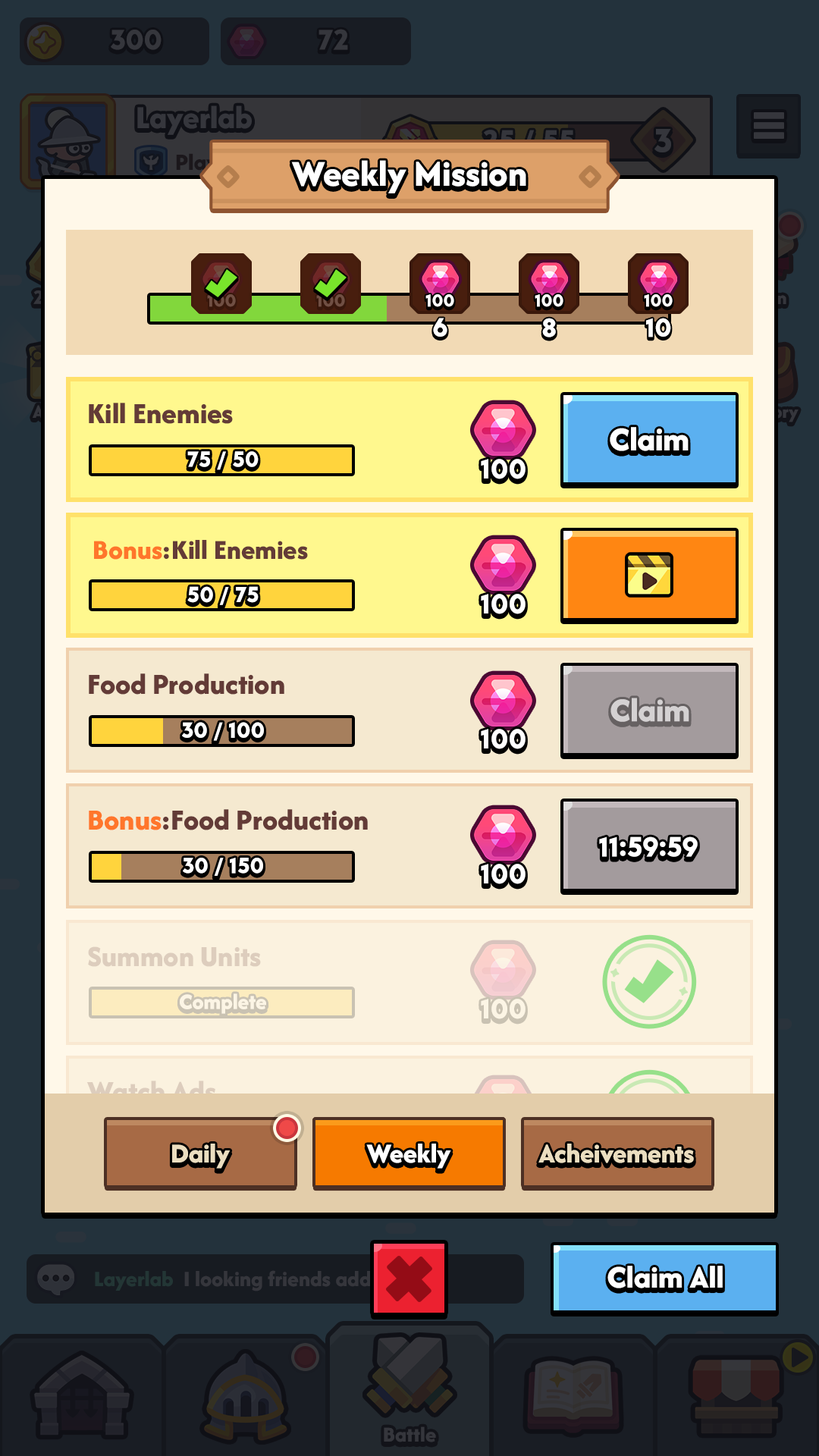
<style>
.page{position:relative;width:819px;height:1456px}
.page>*{position:absolute;margin:0}
.t1{font:37.9px "AfacadFlux-ExtraBold";color:#ffffff}
.t2{font:18.2px "LTAvocado-Bold";color:#704f43}
.t3{font:18.2px "LTAvocado-Bold";color:#ffffff}
.t4{font:27.3px "LTAvocado-Bold";color:#ffffff}
.t5{font:30.3px "AfacadFlux-ExtraBold";color:#633b37}
.t6{font:34.9px "AfacadFlux-ExtraBold";color:#ffffff}
.t7{font:22.7px "LTAvocado-Bold";color:#ffffff}
.t8{font:28.8px "LTAvocado-Bold";color:#ffffff}
.t9{font:28.4px "AfacadFlux-ExtraBold";color:#633b37}
.t10{font:28.4px "AfacadFlux-ExtraBold";color:#ff762b}
.t11{font:34.9px "AfacadFlux-ExtraBold";color:#d4d1d2}
.t12{font:30.3px "AfacadFlux-ExtraBold";color:#ff762b}
.t13{font:30.3px "AfacadFlux-ExtraBold";color:#ddcdbd}
.t14{font:22.7px "AfacadFlux-ExtraBold";color:#fcf5e5}
.t15{font:28.8px "LTAvocado-Bold";color:#fcf5e5}
.t16{font:28.4px "AfacadFlux-ExtraBold";color:#ebdec0}
.t17{font:28.4px "AfacadFlux-ExtraBold";color:#ffffff}
.t18{font:32.8px "AfacadFlux-ExtraBold";color:#ffffff}
</style>
<div class="page">
<p class="t1" style="left:291px;top:160px;width:235px;height:33px">Weekly Mission</p>
<p class="t2" style="left:207px;top:294px;width:29px;height:13px">100</p>
<p class="t2" style="left:316px;top:294px;width:29px;height:13px">100</p>
<p class="t3" style="left:425px;top:294px;width:29px;height:13px">100</p>
<p class="t3" style="left:535px;top:294px;width:28px;height:13px">100</p>
<p class="t3" style="left:644px;top:294px;width:29px;height:13px">100</p>
<p class="t4" style="left:433px;top:318px;width:14px;height:19px">6</p>
<p class="t4" style="left:542px;top:318px;width:14px;height:19px">8</p>
<p class="t4" style="left:646px;top:318px;width:25px;height:19px">10</p>
<p class="t5" style="left:89px;top:403px;width:144px;height:21px">Kill Enemies</p>
<p class="t6" style="left:610px;top:427px;width:79px;height:24px">Claim</p>
<p class="t7" style="left:187px;top:451px;width:72px;height:19px">75 / 50</p>
<p class="t8" style="left:481px;top:459px;width:45px;height:20px">100</p>
<p class="t9" style="left:94px;top:540px;width:214px;height:20px"><span class="t10">Bonus</span>:Kill Enemies</p>
<p class="t7" style="left:187px;top:586px;width:72px;height:19px">50 / 75</p>
<p class="t8" style="left:481px;top:594px;width:45px;height:20px">100</p>
<p class="t5" style="left:89px;top:673px;width:195px;height:22px">Food Production</p>
<p class="t11" style="left:610px;top:698px;width:79px;height:24px">Claim</p>
<p class="t7" style="left:182px;top:722px;width:82px;height:19px">30 / 100</p>
<p class="t8" style="left:481px;top:729px;width:45px;height:20px">100</p>
<p class="t5" style="left:89px;top:809px;width:279px;height:21px"><span class="t12">Bonus</span>:Food Production</p>
<p class="t8" style="left:599px;top:836px;width:99px;height:21px">11:59:59</p>
<p class="t7" style="left:183px;top:858px;width:80px;height:18px">30 / 150</p>
<p class="t8" style="left:481px;top:864px;width:45px;height:20px">100</p>
<p class="t13" style="left:88px;top:946px;width:173px;height:21px">Summon Units</p>
<p class="t14" style="left:180px;top:993px;width:86px;height:21px">Complete</p>
<p class="t15" style="left:481px;top:999px;width:45px;height:20px">100</p>
<p class="t13" style="left:86px;top:1081px;width:130px;height:21px">Watch Ads</p>
<p class="t16" style="left:172px;top:1144px;width:59px;height:25px">Daily</p>
<p class="t17" style="left:366px;top:1144px;width:84px;height:25px">Weekly</p>
<p class="t17" style="left:366px;top:1144px;width:85px;height:25px">Weekly</p>
<p class="t16" style="left:538px;top:1144px;width:156px;height:19px">Acheivements</p>
<p class="t18" style="left:607px;top:1266px;width:116px;height:22px">Claim All</p>
</div>
